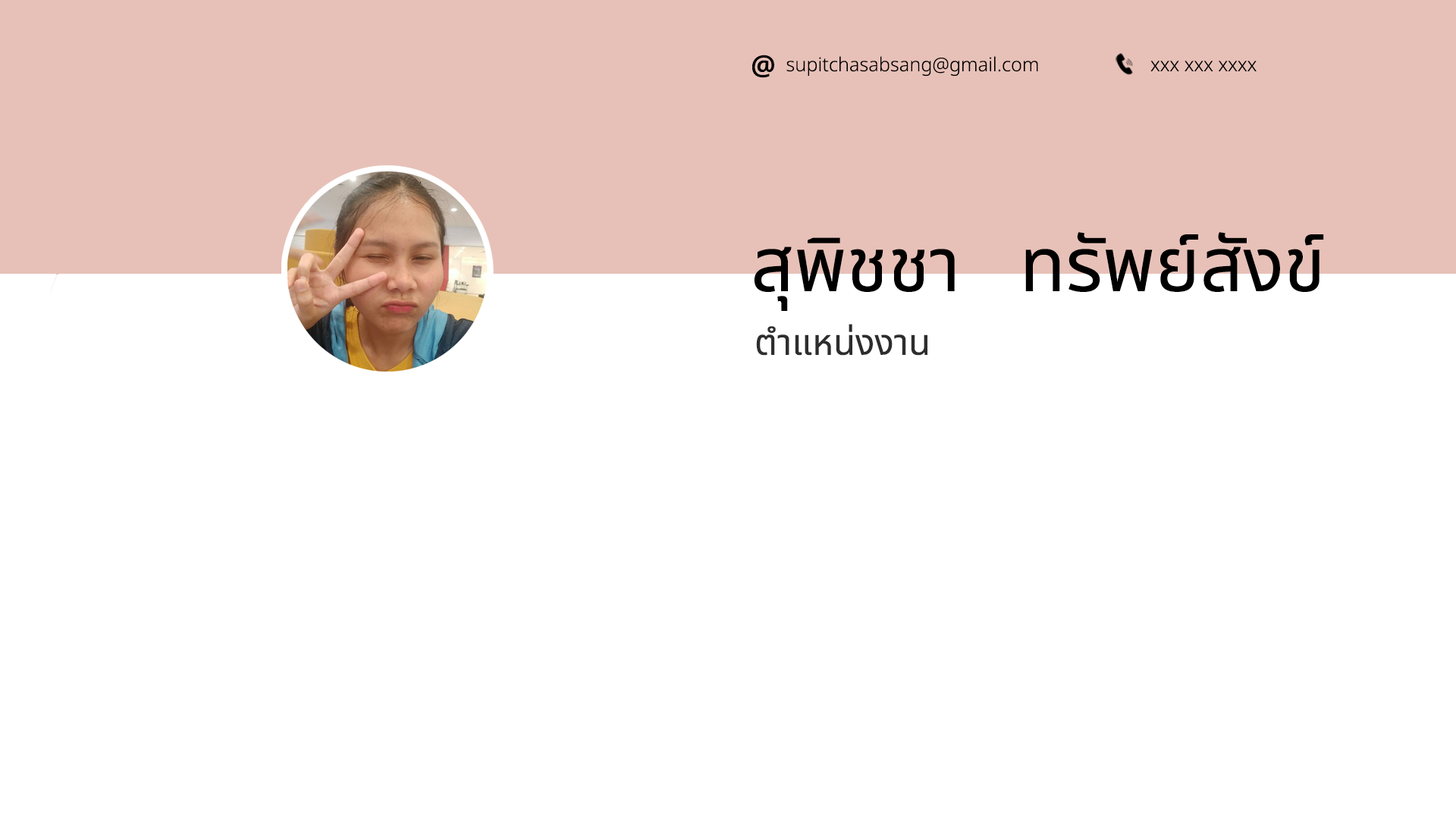
<style>
.page{position:relative;width:1456px;height:819px;background:#ffffff}
.page>*{position:absolute;margin:0}
.t1{font:27.6px "NotoSansThai-SemiBold";color:#000000}
.t2{font:19.1px "NotoSansThai-Light";color:#000000}
.t3{font:75.7px "NotoSansThai-Regular";color:#000000}
.t4{font:35.9px "NotoSansThai-Regular";color:#2d2d2d}
</style>
<div class="page">
<p class="t1" style="left:752px;top:55px;width:22px;height:23px">@</p>
<p class="t2" style="left:786px;top:56px;width:252px;height:20px">supitchasabsang@gmail.com</p>
<p class="t2" style="left:1150px;top:61px;width:107px;height:10px">xxx xxx xxxx</p>
<p class="t3" style="left:754px;top:232px;width:570px;height:79px">สุพิชชา   ทรัพย์สังข์</p>
<p class="t4" style="left:756px;top:324px;width:171px;height:32px">ตำแหน่งงาน</p>
</div>
